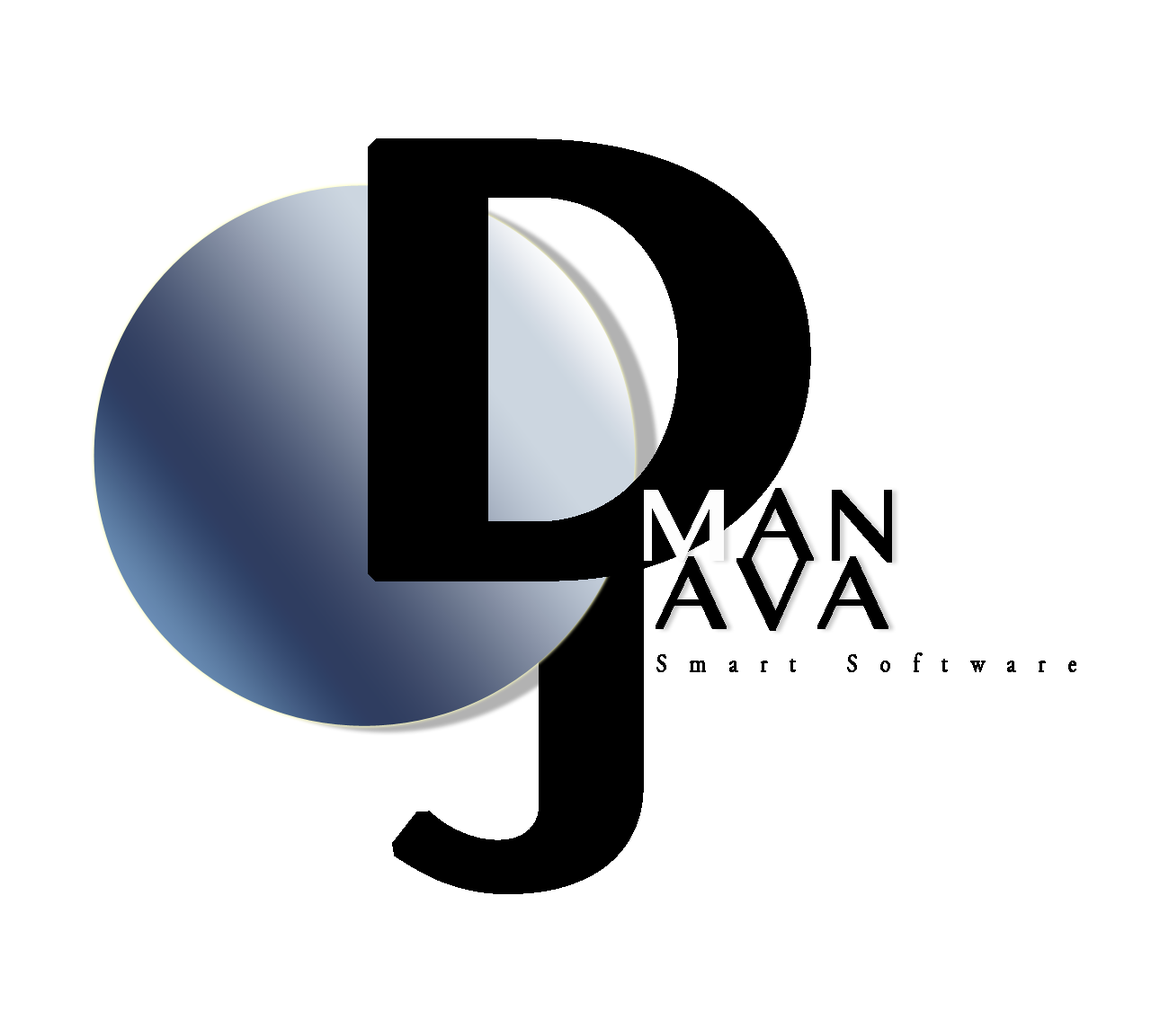
<style>
.page{position:relative;width:1169px;height:1020px;background:#ffffff}
.page>*{position:absolute;margin:0}
.t1{font:539.4px "BanglaMN-Bold";letter-spacing:0.1em;color:#000000;font-weight:bold}
.t2{font:449.5px "BanglaMN-Bold";letter-spacing:0.1em;color:#000000;font-weight:bold}
.t3{font:89.9px "BanglaMN";letter-spacing:0.1em;color:#000000;font-weight:bold}
.t4{font:25.9px "AGaramondPro-Regular";letter-spacing:1em;color:#000000;font-weight:bold;scale:0.83 1}
</style>
<div class="page">
<p class="t1" style="left:368px;top:138px;width:443px;height:444px">D</p>
<p class="t2" style="left:392px;top:516px;width:252px;height:378px">J</p>
<p class="t3" style="left:655px;top:556px;width:233px;height:75px">AVA</p>
<p class="t4" style="left:656px;top:653px;width:420px;height:19px">Smart Software</p>
</div>
